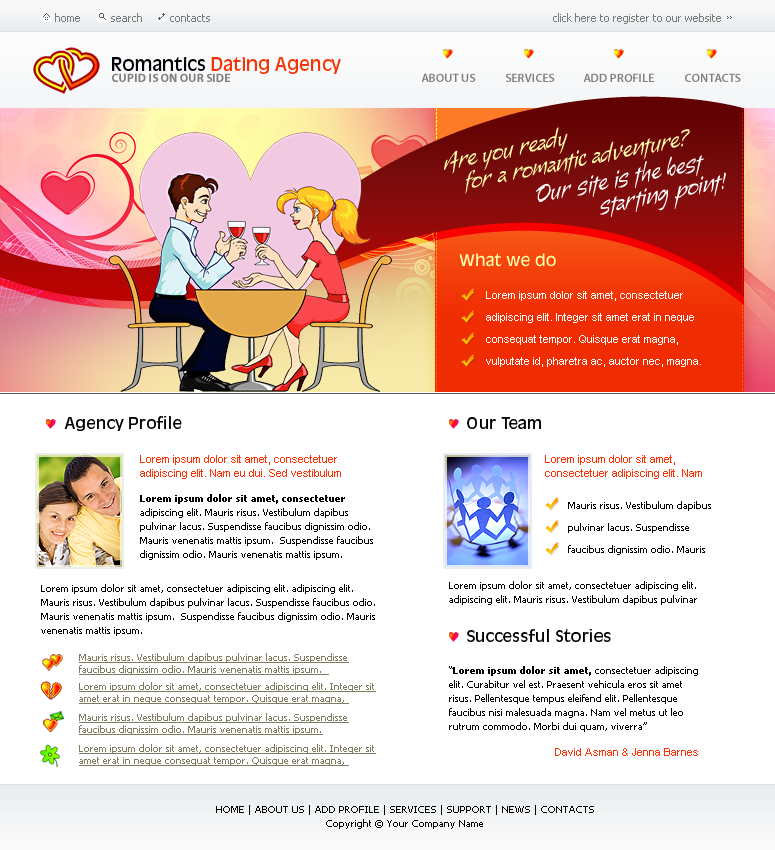
<style>
.page{position:relative;width:775px;height:850px;background:#ffffff}
.page>*{position:absolute;margin:0}
.t1{font:11px "Tahoma";color:#7b7b7b}
.t2{font:18px "AntiqueOliveStd-Roman";color:#f23607}
.t3{font:18px "AntiqueOliveStd-Roman";color:#000005}
.t4{font:12px "MyriadPro-Bold";color:#817d7c}
.t5{font:12px "MyriadPro-Semibold";color:#817d7c}
.t6{font:10px "Tahoma"}
.t7{font:24px "Alma-Alternates";color:#fffea8}
.t8{font:24px "Alma-Alternates";color:#ffffff}
.t9{font:16px "AntiqueOliveStd-Roman";color:#fffea8}
.t10{font:11px/22px "ArialMT";color:#ffffff}
.t11{font:16px "AntiqueOliveStd-Roman";color:#000005}
.t12{font:11px/14px "ArialMT";color:#fb3206}
.t13{font:10px/14px "Tahoma";color:#000000}
.t14{font:10px/14px "Tahoma-Bold";color:#000000}
.t15{font:10px/22px "Tahoma";color:#000000}
.t16{font:10px/12px "Tahoma";color:#7f7c5f;text-decoration:underline}
.t17{font:11px "ArialMT";color:#fb3206}
</style>
<div class="page">
<p class="t1" style="left:55px;top:13px;width:25px;height:9px">home</p>
<p class="t1" style="left:111px;top:13px;width:31px;height:9px">search</p>
<p class="t1" style="left:170px;top:14px;width:40px;height:8px">contacts</p>
<p class="t1" style="left:553px;top:13px;width:168px;height:11px">click here to register to our website</p>
<p class="t2" style="left:112px;top:57px;width:229px;height:17px"><span class="t3">Romantics </span>Dating Agency</p>
<p class="t4" style="left:112px;top:73px;width:118px;height:9px">CUPID IS ON OUR SIDE</p>
<p class="t5" style="left:421px;top:73px;width:55px;height:9px">ABOUT US</p>
<p class="t5" style="left:506px;top:73px;width:49px;height:9px">SERVICES</p>
<p class="t5" style="left:583px;top:73px;width:71px;height:9px">ADD PROFILE</p>
<p class="t5" style="left:685px;top:73px;width:56px;height:9px">CONTACTS</p>
<p class="t6" style="left:742px;top:108px;width:1px;height:299px;rotate:90deg">---------------------------------------------------------------------------</p>
<p class="t7" style="left:444px;top:127px;width:124px;height:47px;rotate:-12deg">Are you ready</p>
<p class="t7" style="left:465px;top:129px;width:225px;height:65px;rotate:-11deg">for a romantic adventure?</p>
<p class="t8" style="left:536px;top:155px;width:169px;height:47px;rotate:-11deg">Our site is the best</p>
<p class="t8" style="left:600px;top:172px;width:126px;height:46px;rotate:-11deg">starting point!</p>
<p class="t9" style="left:459px;top:253px;width:97px;height:14px">What we do</p>
<p class="t10" style="left:486px;top:291px;width:215px;height:76px">Lorem ipsum dolor sit amet, consectetuer adipiscing elit. Integer sit amet erat in neque consequat tempor. Quisque erat magna, vulputate id, pharetra ac, auctor nec, magna.</p>
<p class="t11" style="left:64px;top:416px;width:118px;height:15px">Agency Profile</p>
<p class="t11" style="left:467px;top:417px;width:74px;height:12px">Our Team</p>
<p class="t12" style="left:140px;top:455px;width:201px;height:24px">Lorem ipsum dolor sit amet, consectetuer adipiscing elit. Nam eu dui. Sed vestibulum</p>
<p class="t12" style="left:545px;top:455px;width:157px;height:24px">Lorem ipsum dolor sit amet, consectetuer adipiscing elit. Nam</p>
<p class="t13" style="left:140px;top:494px;width:233px;height:66px"><span class="t14">Lorem ipsum dolor sit amet, consectetuer</span> adipiscing elit. Mauris risus. Vestibulum dapibus pulvinar lacus. Suspendisse faucibus dignissim odio. Mauris venenatis mattis ipsum.  Suspendisse faucibus dignissim odio. Mauris venenatis mattis ipsum.</p>
<p class="t15" style="left:568px;top:501px;width:143px;height:54px">Mauris risus. Vestibulum dapibus pulvinar lacus. Suspendisse faucibus dignissim odio. Mauris</p>
<p class="t13" style="left:449px;top:581px;width:248px;height:24px">Lorem ipsum dolor sit amet, consectetuer adipiscing elit. adipiscing elit. Mauris risus. Vestibulum dapibus pulvinar</p>
<p class="t13" style="left:41px;top:584px;width:334px;height:52px">Lorem ipsum dolor sit amet, consectetuer adipiscing elit. adipiscing elit. Mauris risus. Vestibulum dapibus pulvinar lacus. Suspendisse faucibus odio. Mauris venenatis mattis ipsum.  Suspendisse faucibus dignissim odio. Mauris venenatis mattis ipsum.</p>
<p class="t11" style="left:467px;top:629px;width:144px;height:13px">Successful Stories</p>
<p class="t16" style="left:79px;top:653px;width:270px;height:22px">Mauris risus. Vestibulum dapibus pulvinar lacus. Suspendisse faucibus dignissim odio. Mauris venenatis mattis ipsum.</p>
<p class="t13" style="left:449px;top:666px;width:249px;height:66px">“<span class="t14">Lorem ipsum dolor sit amet, </span>consectetuer adipiscing elit. Curabitur vel est. Praesent vehicula eros sit amet risus. Pellentesque tempus eleifend elit. Pellentesque faucibus nisi malesuada magna. Nam vel metus ut leo rutrum commodo. Morbi dui quam, viverra”</p>
<p class="t16" style="left:79px;top:682px;width:297px;height:22px">Lorem ipsum dolor sit amet, consectetuer adipiscing elit. Integer sit amet erat in neque consequat tempor. Quisque erat magna,</p>
<p class="t16" style="left:79px;top:713px;width:270px;height:22px">Mauris risus. Vestibulum dapibus pulvinar lacus. Suspendisse faucibus dignissim odio. Mauris venenatis mattis ipsum.</p>
<p class="t16" style="left:79px;top:744px;width:297px;height:22px">Lorem ipsum dolor sit amet, consectetuer adipiscing elit. Integer sit amet erat in neque consequat tempor. Quisque erat magna,</p>
<p class="t17" style="left:555px;top:748px;width:143px;height:8px">David Asman &amp; Jenna Barnes</p>
<p class="t13" style="left:216px;top:805px;width:378px;height:24px;text-align:center">HOME | ABOUT US | ADD PROFILE | SERVICES | SUPPORT | NEWS | CONTACTS<br>Copyright © Your Company Name</p>
</div>
